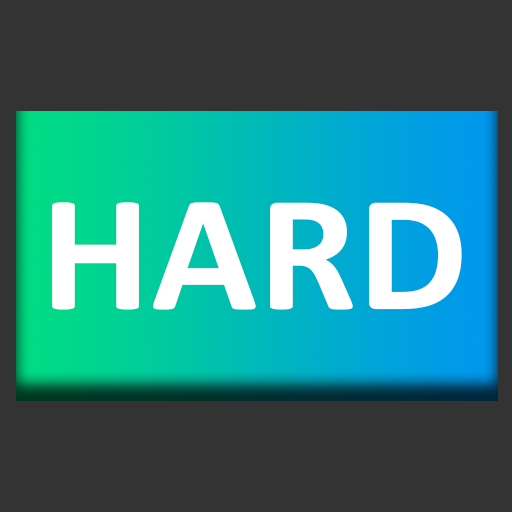
<style>
.page{position:relative;width:512px;height:512px;background:#333333}
.page>*{position:absolute;margin:0}
.t1{font:168px "Calibri-Bold";color:#ffffff;scale:1.05 1}
</style>
<div class="page">
<p class="t1" style="left:52px;top:202px;width:410px;height:108px">HARD</p>
</div>
